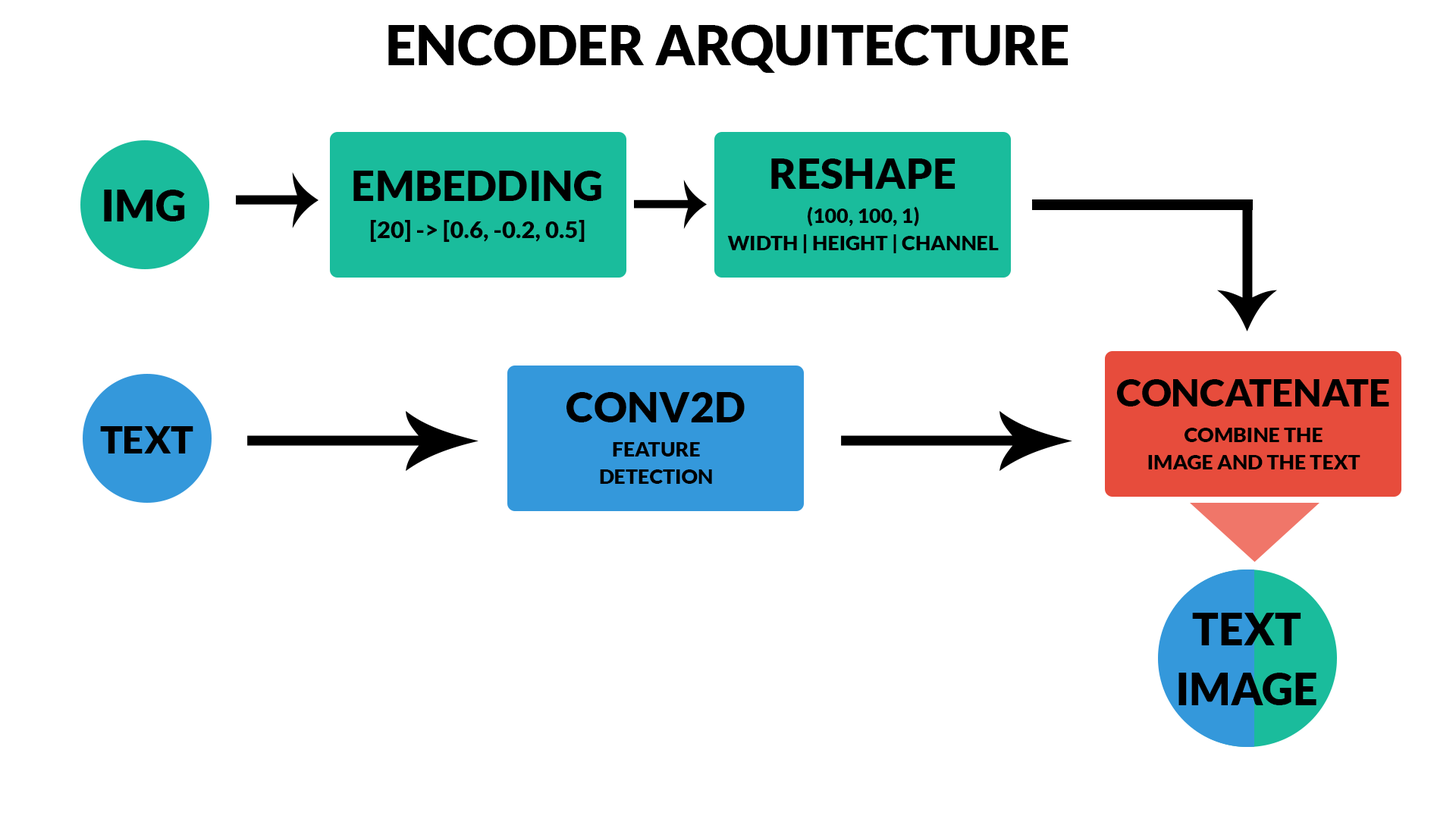
<style>
.page{position:relative;width:1456px;height:819px;background:#ffffff}
.page>*{position:absolute;margin:0}
.t1{font:54.6px "Lato-Black";color:#000000}
.t2{font:42px "Lato-Black";color:#000000}
.t3{font:43.4px "Lato-Black";color:#000000}
.t4{font:20.4px/31.7px "Lato-Black";color:#000000}
.t5{font:23.7px "Lato-Black";color:#000000}
.t6{font:37.7px "Lato-Black";color:#000000}
.t7{font:44.1px/68.5px "Lato-Black";color:#000000}
</style>
<div class="page">
<p class="t1" style="left:388px;top:24px;width:680px;height:49px">ENCODER ARQUITECTURE</p>
<p class="t2" style="left:771px;top:158px;width:184px;height:31px">RESHAPE</p>
<p class="t2" style="left:353px;top:171px;width:248px;height:30px">EMBEDDING</p>
<p class="t3" style="left:104px;top:190px;width:81px;height:31px">IMG</p>
<p class="t4" style="left:727px;top:206px;width:272px;height:47px;text-align:center">(100, 100, 1)<br>WIDTH | HEIGHT | CHANNEL</p>
<p class="t5" style="left:370px;top:220px;width:215px;height:22px">[20] -&gt; [0.6, -0.2, 0.5]</p>
<p class="t6" style="left:1116px;top:379px;width:273px;height:27px">CONCATENATE</p>
<p class="t2" style="left:566px;top:392px;width:179px;height:30px">CONV2D</p>
<p class="t6" style="left:100px;top:426px;width:93px;height:27px">TEXT</p>
<p class="t4" style="left:1148px;top:428px;width:212px;height:41px;text-align:center">COMBINE THE<br>IMAGE AND THE TEXT</p>
<p class="t4" style="left:600px;top:442px;width:112px;height:42px;text-align:center">FEATURE<br>DETECTION</p>
<p class="t7" style="left:1178px;top:613px;width:138px;height:92px;text-align:center">TEXT<br>IMAGE</p>
</div>
